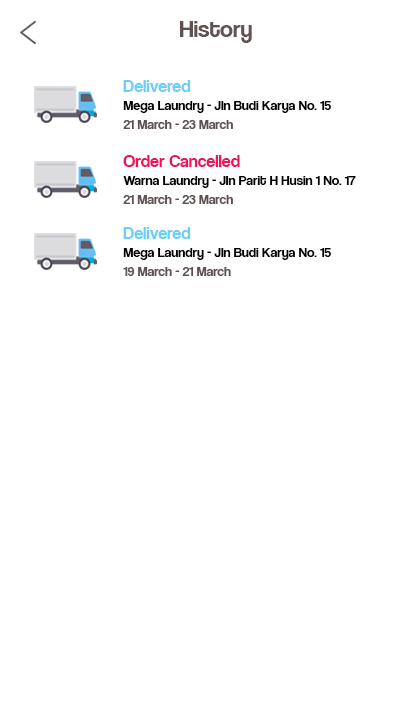
<style>
.page{position:relative;width:420px;height:720px;background:#ffffff}
.page>*{position:absolute;margin:0}
.t1{font:24px "CoolveticaRg-Regular";color:#605252}
.t2{font:18px "CoolveticaRg-Regular";color:#6dcff6}
.t3{font:14px "CoolveticaRg-Regular";color:#000000}
.t4{font:14px "CoolveticaRg-Regular";color:#605252}
.t5{font:18px "CoolveticaRg-Regular";color:#ed145b}
</style>
<div class="page">
<p class="t1" style="left:180px;top:21px;width:72px;height:22px">History</p>
<p class="t2" style="left:123px;top:80px;width:68px;height:12px">Delivered</p>
<p class="t3" style="left:123px;top:101px;width:208px;height:12px">Mega Laundry - Jln Budi Karya No. 15</p>
<p class="t4" style="left:123px;top:120px;width:110px;height:9px">21 March - 23 March</p>
<p class="t5" style="left:123px;top:155px;width:117px;height:12px">Order Cancelled</p>
<p class="t3" style="left:123px;top:176px;width:233px;height:12px">Warna Laundry - Jln Parit H Husin 1 No. 17</p>
<p class="t4" style="left:123px;top:195px;width:110px;height:9px">21 March - 23 March</p>
<p class="t2" style="left:123px;top:227px;width:68px;height:12px">Delivered</p>
<p class="t3" style="left:123px;top:248px;width:208px;height:12px">Mega Laundry - Jln Budi Karya No. 15</p>
<p class="t4" style="left:123px;top:267px;width:108px;height:9px">19 March - 21 March</p>
</div>
